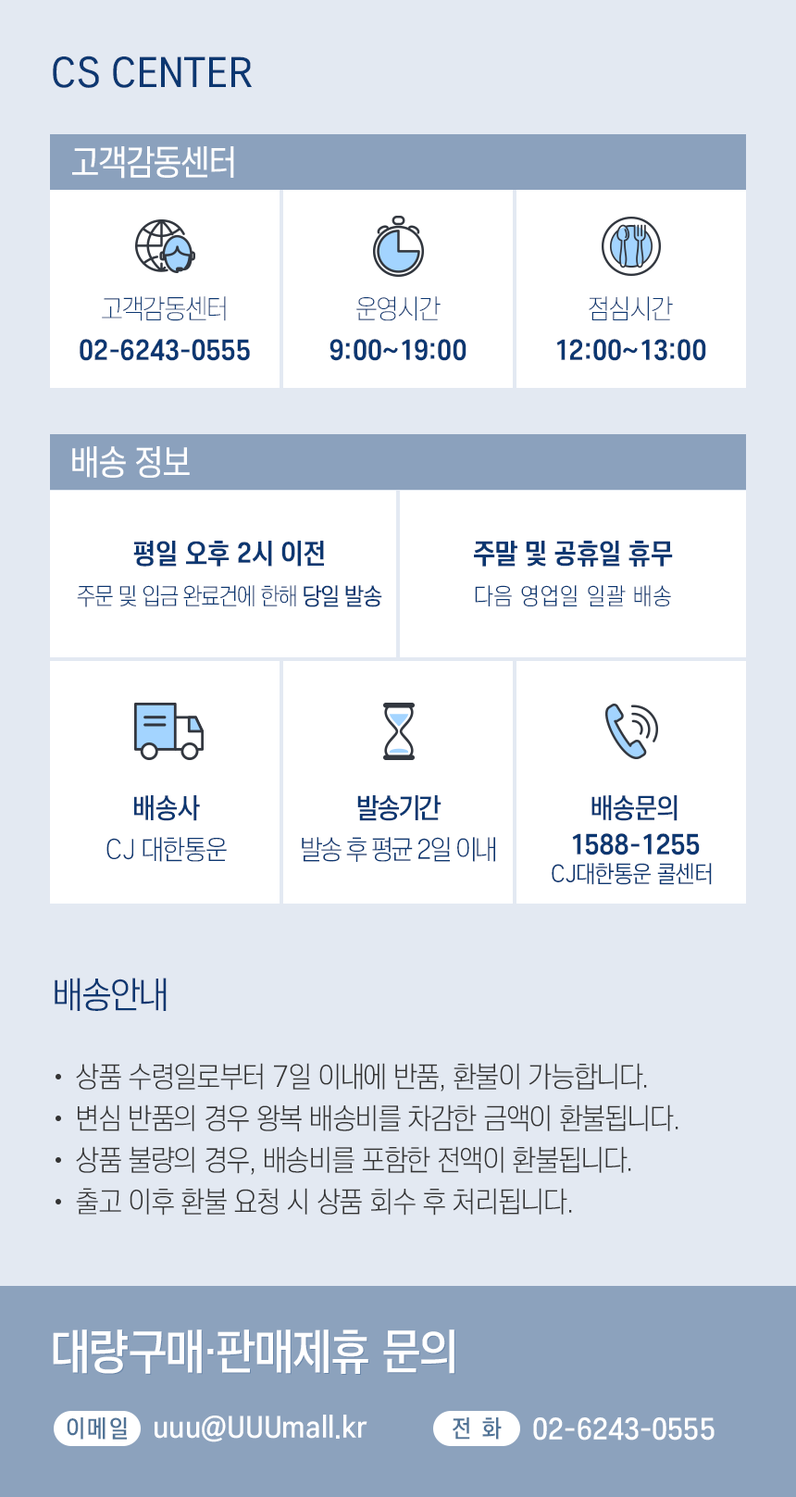
<style>
.page{position:relative;width:796px;height:1497px;background:#e3e9f2}
.page>*{position:absolute;margin:0}
.t1{font:41.7px "SDGtNeoCond-eMd";color:#0c3771;text-transform:uppercase}
.t2{font:35.2px "SDGtNeoCond-eMd";color:#ffffff;text-transform:uppercase}
.t3{font:27.8px/41.7px "SDGtNeoCond-gBd";color:#0c3771}
.t4{font:27.8px/41.7px "SDGtNeoCond-bUl";color:#0c3771;text-transform:uppercase}
.t5{font:27.8px/41.7px "SDGtNeoCond-gBd";color:#0c3771;text-transform:uppercase}
.t6{font:24.1px/41.7px "SDGtNeoCond-cLt";letter-spacing:-0.02em;color:#0c3771}
.t7{font:27.8px/37px "SDGtNeoCond-gBd";color:#0c3771;text-transform:uppercase}
.t8{font:24.1px/31.5px "SDGtNeoCond-eMd";letter-spacing:-0.02em;color:#0c3771}
.t9{font:24.1px/41.7px "SDGtNeoCond-cLt";letter-spacing:0.05em;color:#0c3771;text-transform:uppercase}
.t10{font:27.8px/41.7px "SDGtNeoCond-cLt";color:#0c3771;text-transform:uppercase}
.t11{font:27.8px/37px "SDGtNeoCond-fSb";color:#0c3771;text-transform:uppercase}
.t12{font:27.8px/41.7px "SDGtNeoCond-cLt";letter-spacing:-0.05em;color:#0c3771;text-transform:uppercase}
.t13{font:27.8px/37px "SDGtNeoCond-fSb";letter-spacing:-0.05em;color:#0c3771;text-transform:uppercase}
.t14{font:24.1px/27.8px "SDGtNeoCond-dRg";color:#0c3771;text-transform:uppercase}
.t15{font:37px "SDGtNeoCond-dRg";color:#0c3771}
.t16{font:29.6px/41.7px "SDGtNeoCond-cLt";color:#333333}
.t17{font:37px/74.1px "SDGtNeoCond-dRg";color:#0c3771}
.t18{font:29.6px/80px "SDGtNeoCond-cLt";color:#333333}
.t19{font:48.2px "SDGtNeoCond-fSb";color:#ffffff}
.t20{font:24.1px "SDGtNeoCond-fSb";letter-spacing:0.1em;color:#507396}
.t21{font:29.6px "SDGtNeoCond-fSb";color:#ffffff}
</style>
<div class="page">
<p class="t1" style="left:53px;top:56px;width:200px;height:32px">CS Center</p>
<p class="t2" style="left:72px;top:146px;width:162px;height:33px">고객감동센터</p>
<p class="t3" style="left:80px;top:296px;width:170px;height:65px;text-align:center"><span class="t4">고객감동센터<br></span>02-6243-0555</p>
<p class="t5" style="left:330px;top:296px;width:137px;height:65px;text-align:center"><span class="t4">운영시간<br></span>9:00~19:00</p>
<p class="t5" style="left:557px;top:296px;width:150px;height:65px;text-align:center"><span class="t4">점심시간<br></span>12:00~13:00</p>
<p class="t2" style="left:72px;top:446px;width:118px;height:32px">배송 정보</p>
<p class="t6" style="left:77px;top:541px;width:305px;height:66px;text-align:center"><span class="t7">평일 오후 2시 이전<br></span>주문 및 입금 완료건에 한해 <span class="t8">당일 발송</span></p>
<p class="t9" style="left:474px;top:541px;width:199px;height:66px;text-align:center"><span class="t7">주말 및 공휴일 휴무<br></span>다음 영업일 일괄 배송</p>
<p class="t10" style="left:106px;top:795px;width:121px;height:67px;text-align:center"><span class="t11">배송사<br></span>CJ 대한통운</p>
<p class="t12" style="left:302px;top:795px;width:193px;height:67px;text-align:center"><span class="t13">발송기간<br></span>발송 후 평균 2일 이내</p>
<p class="t14" style="left:552px;top:795px;width:160px;height:90px;text-align:center"><span class="t11">배송문의<br></span><span class="t7">1588-1255<br></span>CJ대한통운 콜센터</p>
<p class="t15" style="left:55px;top:978px;width:112px;height:33px">배송안내</p>
<p class="t16" style="left:76px;top:1063px;width:603px;height:153px"><span class="t17"><br></span><span class="t18">상품 수령일로부터 7일 이내에 반품, 환불이 가능합니다.<br></span>변심 반품의 경우 왕복 배송비를 차감한 금액이 환불됩니다.<br>상품 불량의 경우, 배송비를 포함한 전액이 환불됩니다.<br>출고 이후 환불 요청 시 상품 회수 후 처리됩니다.</p>
<p class="t19" style="left:53px;top:1330px;width:402px;height:44px">대량구매·판매제휴 문의</p>
<p class="t20" style="left:67px;top:1418px;width:60px;height:22px">이메일</p>
<p class="t21" style="left:155px;top:1415px;width:213px;height:28px">uuu@UUUmall.kr</p>
<p class="t20" style="left:453px;top:1418px;width:49px;height:22px">전 화</p>
<p class="t21" style="left:533px;top:1418px;width:182px;height:23px">02-6243-0555</p>
</div>
